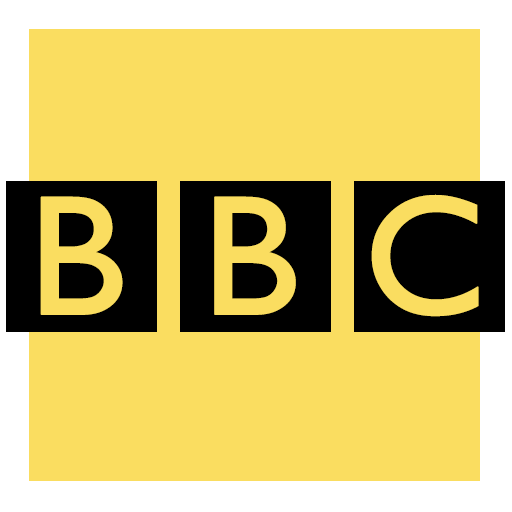
<style>
.page{position:relative;width:512px;height:512px;background:#fadd60}
.page>*{position:absolute;margin:0}
.t1{font:171.6px "GillSans";letter-spacing:-0.04em;color:#fadd60;font-weight:bold}
</style>
<div class="page">
<p class="t1" style="left:40px;top:196px;width:83px;height:119px">B</p>
<p class="t1" style="left:214px;top:196px;width:82px;height:119px">B</p>
<p class="t1" style="left:371px;top:194px;width:108px;height:123px">C</p>
</div>
